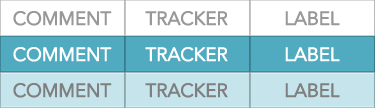
<style>
.page{position:relative;width:375px;height:108px;background:#ffffff}
.page>*{position:absolute;margin:0}
.t1{font:18.7px "AvenirNextLTPro-Regular";letter-spacing:-0.025em;color:#989898;text-transform:uppercase;font-weight:bold}
.t2{font:18.7px "AvenirNextLTPro-Regular";letter-spacing:-0.025em;color:#ffffff;text-transform:uppercase;font-weight:bold}
.t3{font:18.7px "AvenirNextLTPro-Regular";letter-spacing:-0.025em;color:#7f7f7f;text-transform:uppercase;font-weight:bold}
</style>
<div class="page">
<p class="t1" style="left:13px;top:11px;width:99px;height:15px">COMMENT</p>
<p class="t1" style="left:145px;top:11px;width:83px;height:15px">TRACKER</p>
<p class="t1" style="left:285px;top:11px;width:55px;height:15px">LABEL</p>
<p class="t2" style="left:13px;top:47px;width:99px;height:15px">COMMENT</p>
<p class="t2" style="left:145px;top:47px;width:83px;height:15px">TRACKER</p>
<p class="t2" style="left:285px;top:47px;width:55px;height:15px">LABEL</p>
<p class="t3" style="left:13px;top:83px;width:99px;height:15px">COMMENT</p>
<p class="t3" style="left:145px;top:83px;width:83px;height:15px">TRACKER</p>
<p class="t3" style="left:285px;top:83px;width:55px;height:15px">LABEL</p>
</div>
